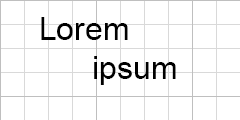
<style>
.page{position:relative;width:240px;height:120px;background:#ffffff}
.page>*{position:absolute;margin:0}
.t1{font:32px "ArialMT";color:#000000}
</style>
<div class="page">
<p class="t1" style="left:41px;top:17px;width:135px;height:68px">Lorem<br>        ipsum</p>
</div>
